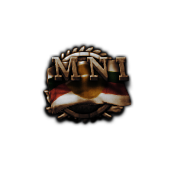
<style>
.page{position:relative;width:170px;height:170px;background:#ffffff}
.page>*{position:absolute;margin:0}
.t1{font:30px "SourceSerifRoman-Semibold"}
</style>
<div class="page">
<p class="t1" style="left:52px;top:58px;width:77px;height:21px">M N I</p>
<p class="t1" style="left:52px;top:57px;width:77px;height:21px">M N I</p>
</div>
